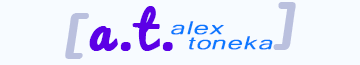
<style>
.page{position:relative;width:360px;height:65px;background:#f7fbff}
.page>*{position:absolute;margin:0}
.t1{font:50px "Pacifico";color:#5c00e6;font-weight:bold}
.t2{font:24px/15px "Microsoft-Yi-Baiti";color:#0a78ff;font-weight:bold;font-style:italic;scale:1.5 1}
</style>
<div class="page">
<p class="t1" style="left:89px;top:6px;width:84px;height:45px">a.t.</p>
<p class="t2" style="left:171px;top:21px;width:102px;height:29px">alex<br> toneka</p>
</div>
